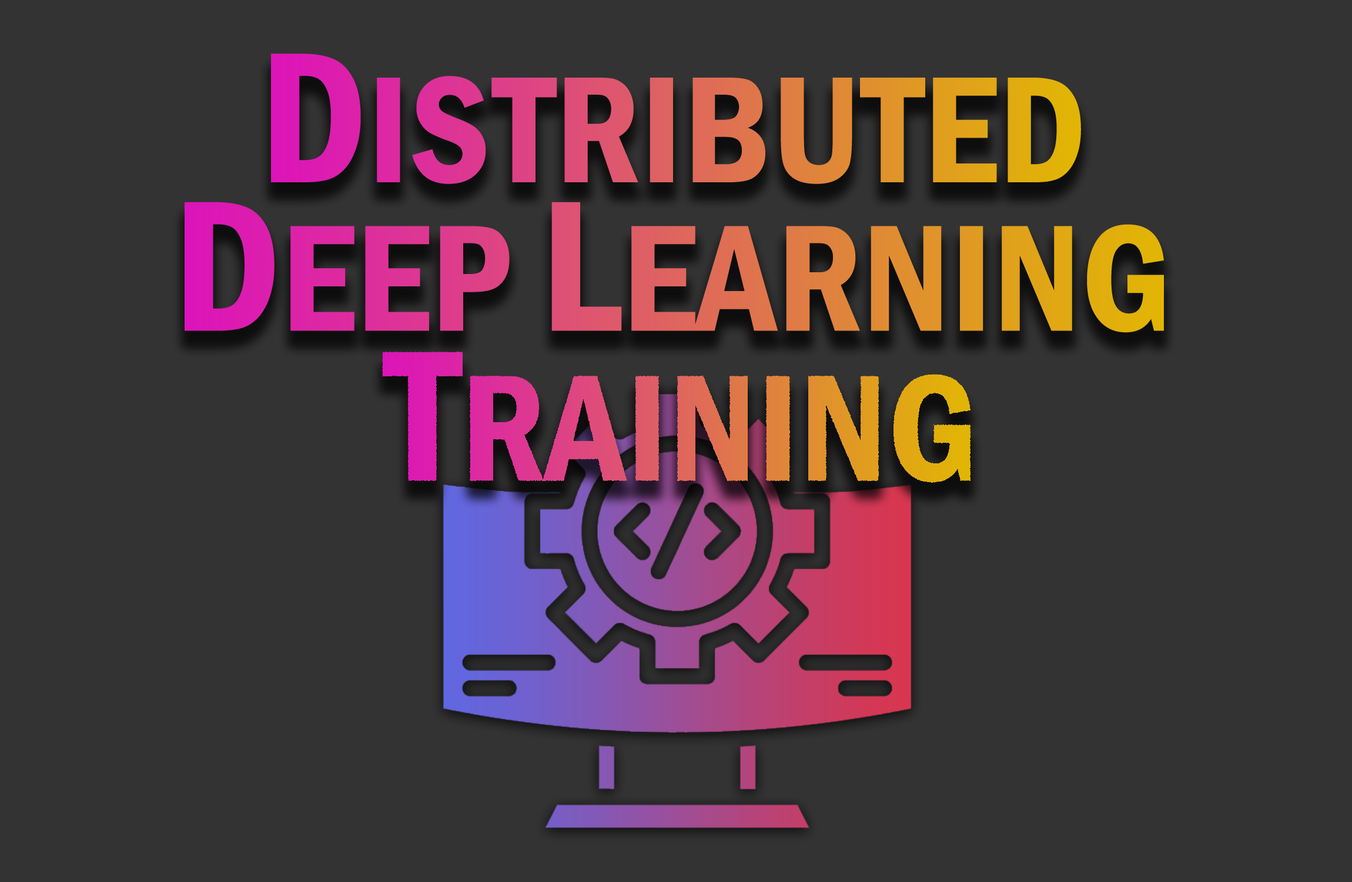
<style>
.page{position:relative;width:1352px;height:882px;background:#333333}
.page>*{position:absolute;margin:0}
.t1{font:156.8px "FranklinGothic-DemiCond"}
.t2{font:192.7px "FranklinGothic-DemiCond"}
</style>
<div class="page">
<p class="t1" style="left:271px;top:53px;width:810px;height:131px"><span class="t2">D</span>ISTRIBUTED</p>
<p class="t1" style="left:185px;top:202px;width:979px;height:131px"><span class="t2">D</span>EEP <span class="t2">L</span>EARNING</p>
<p class="t1" style="left:382px;top:352px;width:589px;height:131px"><span class="t2">T</span>RAINING</p>
</div>
